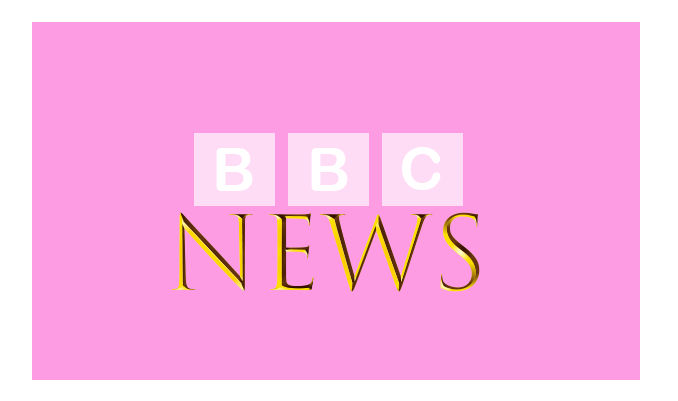
<style>
.page{position:relative;width:678px;height:401px;background:#fd9be3}
.page>*{position:absolute;margin:0}
.t1{font:60px "ArialRoundedMTBold";color:#ffffff}
.t2{font:100px "TrajanColor-Concept"}
</style>
<div class="page">
<p class="t1" style="left:216px;top:148px;width:37px;height:43px">B</p>
<p class="t1" style="left:311px;top:148px;width:37px;height:43px">B</p>
<p class="t1" style="left:402px;top:147px;width:39px;height:43px">C</p>
<p class="t2" style="left:171px;top:212px;width:309px;height:80px">News</p>
</div>
